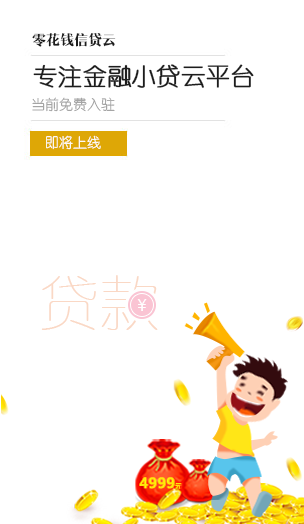
<style>
.page{position:relative;width:304px;height:524px;background:#ffffff}
.page>*{position:absolute;margin:0}
.t1{font:14px "MFShangYa_Noncommercial-Regular";color:#1d1d1d}
.t2{font:24px "YouYuan";color:#1d1d1d;font-weight:bold}
.t3{font:14px "YouYuan";color:#9d9d9d}
.t4{font:14px "YouYuan";color:#ffffff}
</style>
<div class="page">
<p class="t1" style="left:32px;top:33px;width:84px;height:14px">零花钱信贷云</p>
<p class="t2" style="left:33px;top:64px;width:221px;height:24px">专注金融小贷云平台</p>
<p class="t3" style="left:32px;top:97px;width:83px;height:15px">当前免费入驻</p>
<p class="t4" style="left:46px;top:135px;width:55px;height:15px">即将上线</p>
</div>
